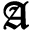
<style>
.page{position:relative;width:32px;height:32px;background:#ffffff}
.page>*{position:absolute;margin:0}
.t1{font:39.6px "OldEnglishTextMT";color:#000000;font-weight:bold}
.t2{font:37.5px "OldEnglishTextMT";color:#000000;font-weight:bold}
</style>
<div class="page">
<p class="t1" style="left:2px;top:0px;width:28px;height:31px">A</p>
<p class="t2" style="left:3px;top:1px;width:26px;height:29px">A</p>
</div>
